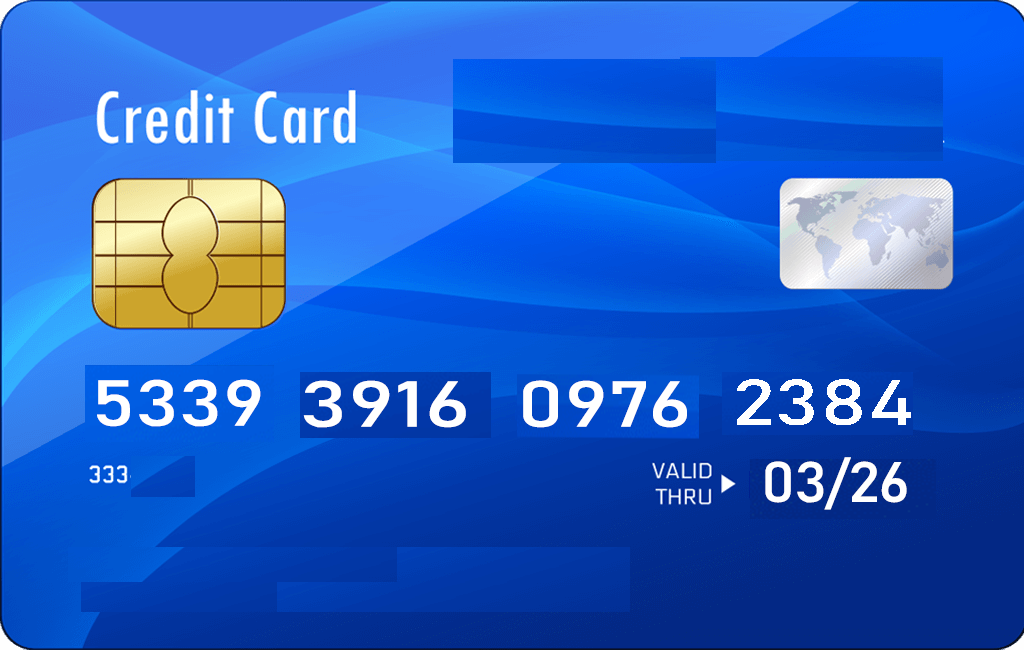
<style>
.page{position:relative;width:1024px;height:650px}
.page>*{position:absolute;margin:0}
.t1{font:64px "Bahnschrift";color:#ffffff;scale:1.29 1}
.t2{font:64px "Bahnschrift";color:#ffffff;scale:1.42 1}
.t3{font:64px "Bahnschrift";color:#ffffff;scale:1.34 1}
.t4{font:64px "Bahnschrift";color:#ffffff;scale:1.31 1}
.t5{font:56px "Bahnschrift";color:#ffffff;scale:1.1 1}
</style>
<div class="page">
<p class="t1" style="left:97px;top:379px;width:164px;height:48px">5339</p>
<p class="t2" style="left:303px;top:380px;width:163px;height:48px">3916</p>
<p class="t3" style="left:523px;top:380px;width:164px;height:48px">0976</p>
<p class="t4" style="left:737px;top:379px;width:174px;height:46px">2384</p>
<p class="t5" style="left:765px;top:457px;width:142px;height:53px">03/26</p>
</div>
